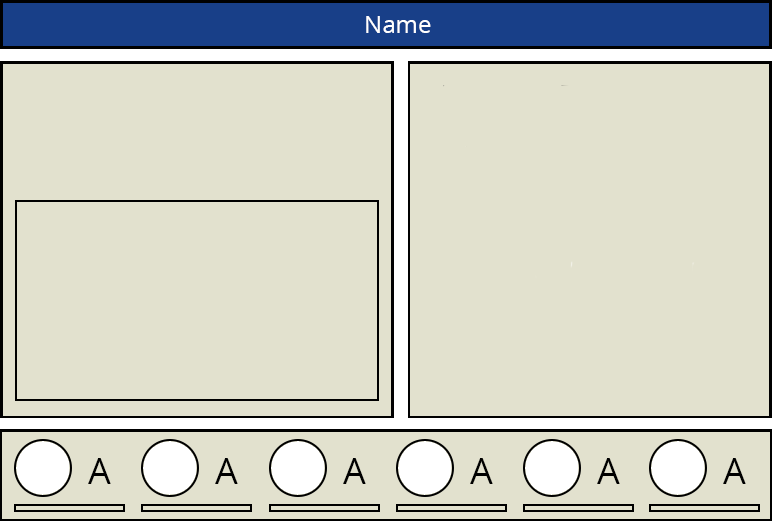
<style>
.page{position:relative;width:772px;height:521px;background:#e2e1ce}
.page>*{position:absolute;margin:0}
.t1{font:24px "OpenSans";color:#ffffff}
.t2{font:36px "OpenSans";color:#000000}
</style>
<div class="page">
<p class="t1" style="left:366px;top:16px;width:65px;height:17px">Name</p>
<p class="t2" style="left:88px;top:458px;width:23px;height:26px">A</p>
<p class="t2" style="left:215px;top:458px;width:23px;height:26px">A</p>
<p class="t2" style="left:343px;top:458px;width:23px;height:26px">A</p>
<p class="t2" style="left:470px;top:458px;width:23px;height:26px">A</p>
<p class="t2" style="left:597px;top:458px;width:23px;height:26px">A</p>
<p class="t2" style="left:723px;top:458px;width:23px;height:26px">A</p>
</div>
